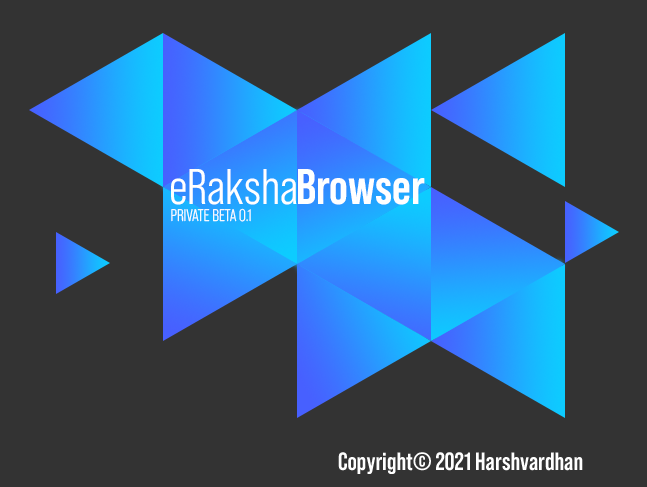
<style>
.page{position:relative;width:647px;height:487px;background:#333333}
.page>*{position:absolute;margin:0}
.t1{font:50px "BebasNeuePro-Middle";color:#ffffff}
.t2{font:50px "BebasNeuePro-Bold";color:#ffffff}
.t3{font:16.7px "BebasNeuePro-Book";color:#ffffff}
.t4{font:25px "BebasNeuePro-Bold";color:#ffffff}
</style>
<div class="page">
<p class="t1" style="left:171px;top:169px;width:126px;height:36px">eRaksha</p>
<p class="t2" style="left:298px;top:169px;width:127px;height:36px">Browser</p>
<p class="t3" style="left:171px;top:208px;width:80px;height:14px">PRIVATE BETA 0.1</p>
<p class="t4" style="left:338px;top:452px;width:245px;height:22px">Copyright© 2021 Harshvardhan</p>
</div>
